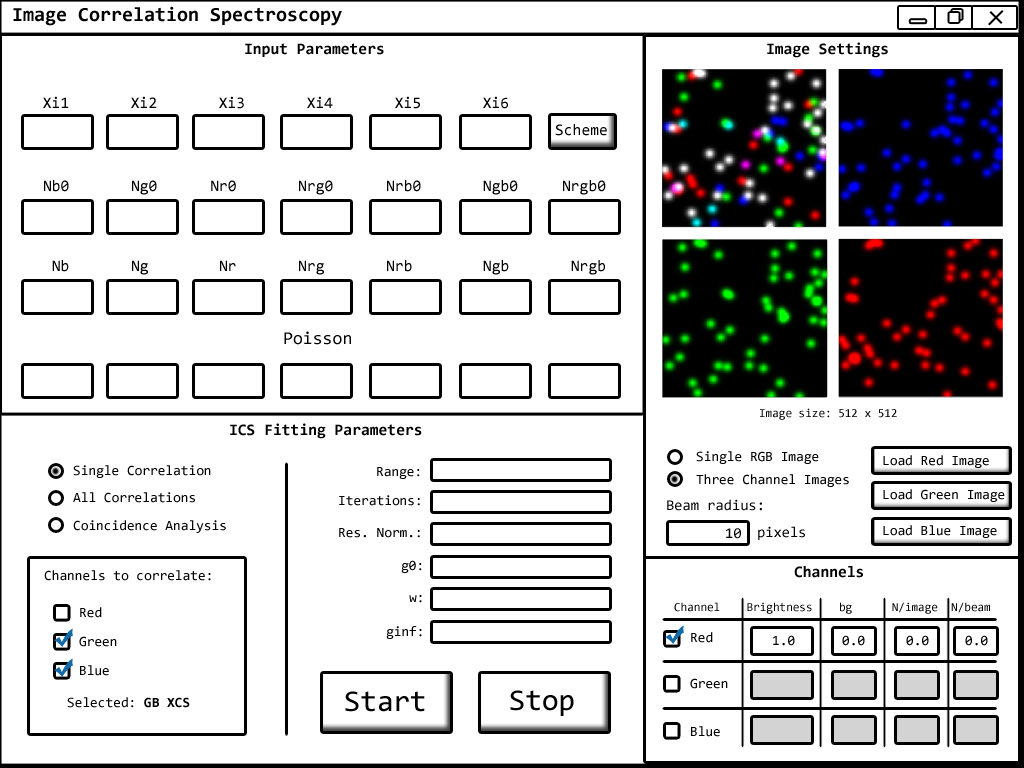
<style>
.page{position:relative;width:1024px;height:768px;background:#ffffff}
.page>*{position:absolute;margin:0}
.t1{font:20px "Consolas-Bold";color:#000000}
.t2{font:16px "Consolas-Bold";color:#000000}
.t3{font:16px "Consolas";color:#000000}
.t4{font:18px "Consolas";color:#000000}
.t5{font:12px "Consolas";color:#000000}
.t6{font:14px "Consolas";color:#000000}
.t7{font:15px "Consolas";color:#000000}
.t8{font:14px "Consolas-Bold";color:#000000}
.t9{font:30px "Consolas";color:#000000}
</style>
<div class="page">
<p class="t1" style="left:13px;top:6px;width:329px;height:20px">Image Correlation Spectroscopy</p>
<p class="t2" style="left:245px;top:43px;width:139px;height:14px">Input Parameters</p>
<p class="t2" style="left:767px;top:42px;width:121px;height:16px">Image Settings</p>
<p class="t3" style="left:43px;top:96px;width:465px;height:13px">Xi1       Xi2       Xi3       Xi4       Xi5       Xi6</p>
<p class="t3" style="left:555px;top:124px;width:52px;height:12px">Scheme</p>
<p class="t3" style="left:44px;top:180px;width:562px;height:15px">Nb0       Ng0      Nr0       Nrg0      Nrb0       Ngb0     Nrgb0</p>
<p class="t3" style="left:52px;top:260px;width:553px;height:15px">Nb       Ng        Nr       Nrg       Nrb        Ngb       Nrgb</p>
<p class="t4" style="left:284px;top:331px;width:67px;height:14px">Poisson</p>
<p class="t5" style="left:760px;top:408px;width:137px;height:12px">Image size: 512 x 512</p>
<p class="t2" style="left:230px;top:423px;width:192px;height:16px">ICS Fitting Parameters</p>
<p class="t6" style="left:696px;top:451px;width:123px;height:13px">Single RGB Image</p>
<p class="t6" style="left:883px;top:455px;width:106px;height:13px">Load Red Image</p>
<p class="t6" style="left:73px;top:465px;width:138px;height:13px">Single Correlation</p>
<p class="t6" style="left:377px;top:467px;width:43px;height:12px">Range:</p>
<p class="t6" style="left:696px;top:474px;width:153px;height:13px">Three Channel Images</p>
<p class="t6" style="left:73px;top:492px;width:122px;height:11px">All Correlations</p>
<p class="t6" style="left:339px;top:495px;width:81px;height:11px">Iterations:</p>
<p class="t6" style="left:883px;top:489px;width:122px;height:13px">Load Green Image</p>
<p class="t7" style="left:667px;top:499px;width:95px;height:12px">Beam radius:</p>
<p class="t6" style="left:73px;top:520px;width:153px;height:13px">Coincidence Analysis</p>
<p class="t6" style="left:339px;top:528px;width:81px;height:10px">Res. Norm.:</p>
<p class="t7" style="left:726px;top:528px;width:15px;height:11px">10</p>
<p class="t7" style="left:758px;top:526px;width:47px;height:14px">pixels</p>
<p class="t6" style="left:883px;top:525px;width:114px;height:13px">Load Blue Image</p>
<p class="t6" style="left:401px;top:560px;width:21px;height:13px">g0:</p>
<p class="t2" style="left:794px;top:566px;width:69px;height:12px">Channels</p>
<p class="t6" style="left:44px;top:570px;width:167px;height:11px">Channels to correlate:</p>
<p class="t6" style="left:409px;top:595px;width:13px;height:8px">w:</p>
<p class="t5" style="left:674px;top:602px;width:316px;height:12px">Channel    Brightness    bg      N/image  N/beam</p>
<p class="t6" style="left:80px;top:607px;width:22px;height:11px">Red</p>
<p class="t6" style="left:386px;top:626px;width:36px;height:13px">ginf:</p>
<p class="t6" style="left:79px;top:636px;width:38px;height:11px">Green</p>
<p class="t6" style="left:691px;top:632px;width:22px;height:11px">Red</p>
<p class="t6" style="left:773px;top:635px;width:22px;height:11px">1.0</p>
<p class="t6" style="left:842px;top:635px;width:23px;height:11px">0.0</p>
<p class="t6" style="left:906px;top:635px;width:23px;height:11px">0.0</p>
<p class="t6" style="left:965px;top:635px;width:23px;height:11px">0.0</p>
<p class="t6" style="left:80px;top:665px;width:29px;height:11px">Blue</p>
<p class="t6" style="left:690px;top:678px;width:38px;height:11px">Green</p>
<p class="t6" style="left:67px;top:697px;width:123px;height:11px">Selected: <span class="t8">GB XCS</span></p>
<p class="t9" style="left:345px;top:691px;width:80px;height:21px">Start</p>
<p class="t9" style="left:510px;top:690px;width:64px;height:26px">Stop</p>
<p class="t6" style="left:691px;top:726px;width:29px;height:11px">Blue</p>
</div>
